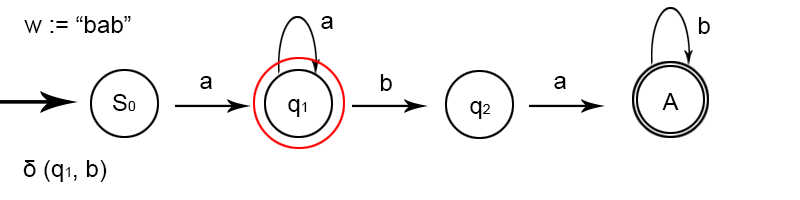
<style>
.page{position:relative;width:800px;height:200px;background:#ffffff}
.page>*{position:absolute;margin:0}
.t1{font:24px "ArialMT";color:#000000}
.t2{font:14px "ArialMT";color:#000000}
</style>
<div class="page">
<p class="t1" style="left:24px;top:16px;width:107px;height:17px">w := “bab”</p>
<p class="t1" style="left:321px;top:16px;width:12px;height:13px">a</p>
<p class="t1" style="left:698px;top:17px;width:12px;height:17px">b</p>
<p class="t1" style="left:200px;top:76px;width:12px;height:13px">a</p>
<p class="t1" style="left:380px;top:74px;width:12px;height:17px">b</p>
<p class="t1" style="left:554px;top:76px;width:12px;height:13px">a</p>
<p class="t1" style="left:113px;top:94px;width:23px;height:17px">S<span class="t2">0</span></p>
<p class="t1" style="left:288px;top:99px;width:19px;height:18px">q<span class="t2">1</span></p>
<p class="t1" style="left:470px;top:101px;width:20px;height:18px">q<span class="t2">2</span></p>
<p class="t1" style="left:662px;top:93px;width:17px;height:17px">A</p>
<p class="t1" style="left:23px;top:160px;width:84px;height:22px">δ (q<span class="t2">1</span>, b)</p>
</div>
